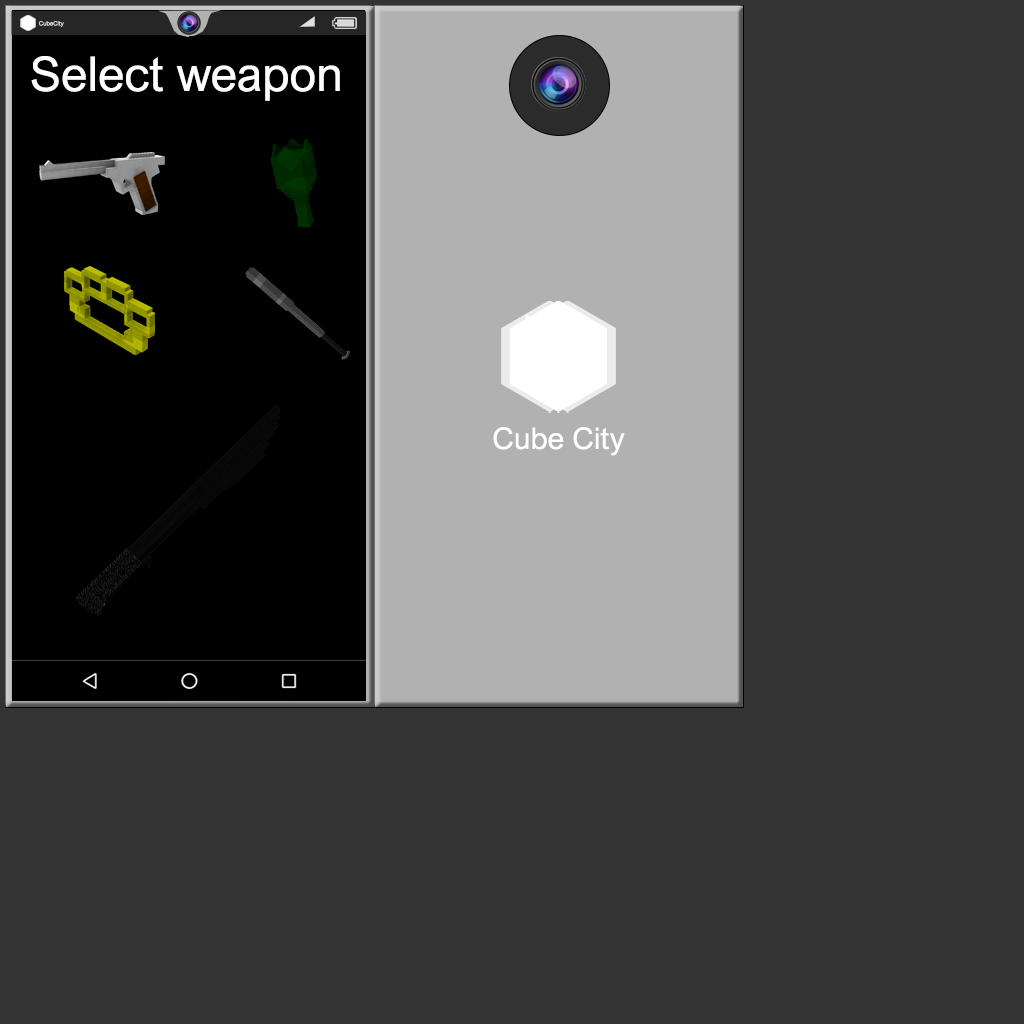
<style>
.page{position:relative;width:1024px;height:1024px;background:#333333}
.page>*{position:absolute;margin:0}
.t1{font:6px "ArialNova";color:#e0e0e0}
.t2{font:48px "ArialNova";color:#ffffff}
.t3{font:30px "ArialNova";color:#ffffff}
</style>
<div class="page">
<p class="t1" style="left:39px;top:21px;width:25px;height:6px">CubeCity</p>
<p class="t2" style="left:31px;top:56px;width:309px;height:45px">Select weapon</p>
<p class="t3" style="left:493px;top:427px;width:132px;height:29px">Cube City</p>
</div>
